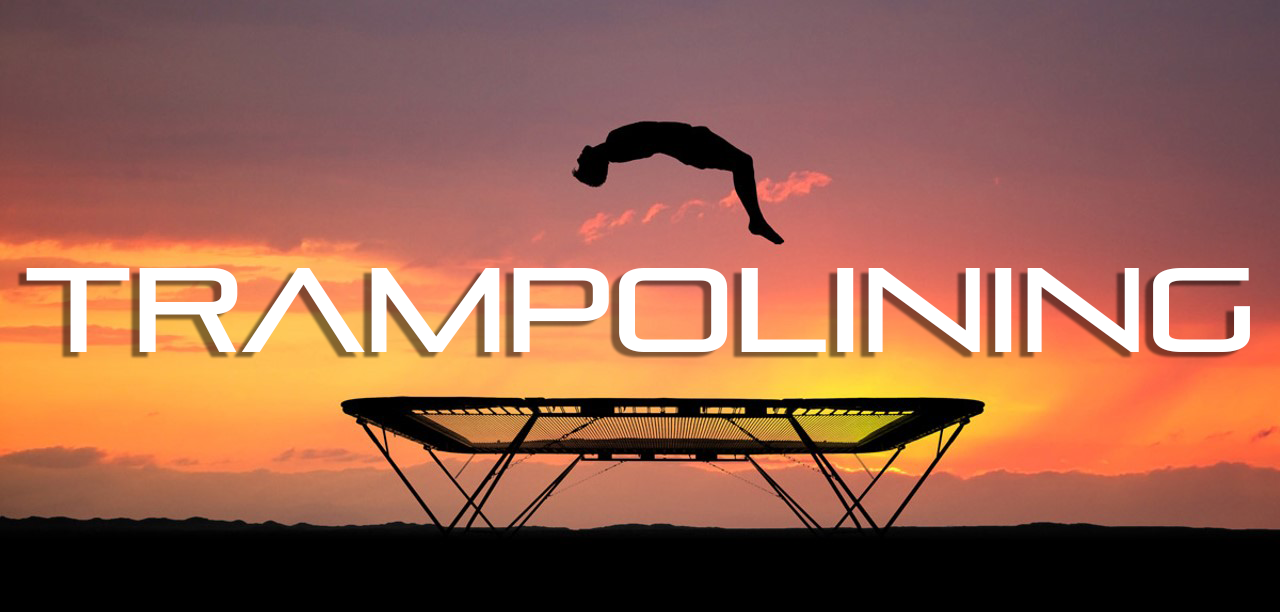
<style>
.page{position:relative;width:1280px;height:612px}
.page>*{position:absolute;margin:0}
.t1{font:118.7px "PirulenRg-Regular";color:#ffffff}
</style>
<div class="page">
<p class="t1" style="left:26px;top:268px;width:1224px;height:84px">trampolining</p>
</div>
